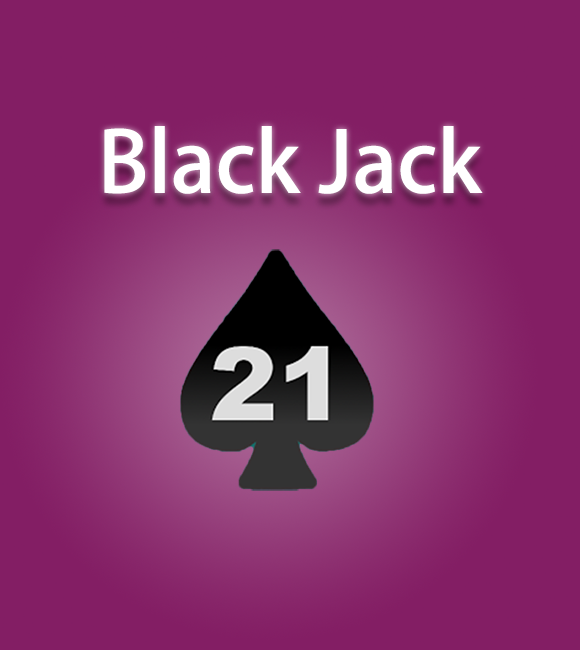
<style>
.page{position:relative;width:580px;height:650px;background:#831e64}
.page>*{position:absolute;margin:0}
.t1{font:83.2px "AdobeHeitiStd-Regular";color:#ffffff}
</style>
<div class="page">
<p class="t1" style="left:104px;top:126px;width:379px;height:68px">Black Jack</p>
</div>
